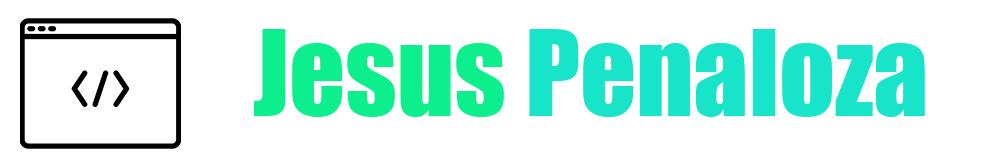
<style>
.page{position:relative;width:983px;height:167px;background:#ffffff}
.page>*{position:absolute;margin:0}
.t1{font:109.6px "Impact";color:#17e4c9}
.t2{font:109.6px "Impact";color:#0cef8c}
</style>
<div class="page">
<p class="t1" style="left:254px;top:29px;width:671px;height:88px"><span class="t2">Jesus </span>Penaloza</p>
</div>
